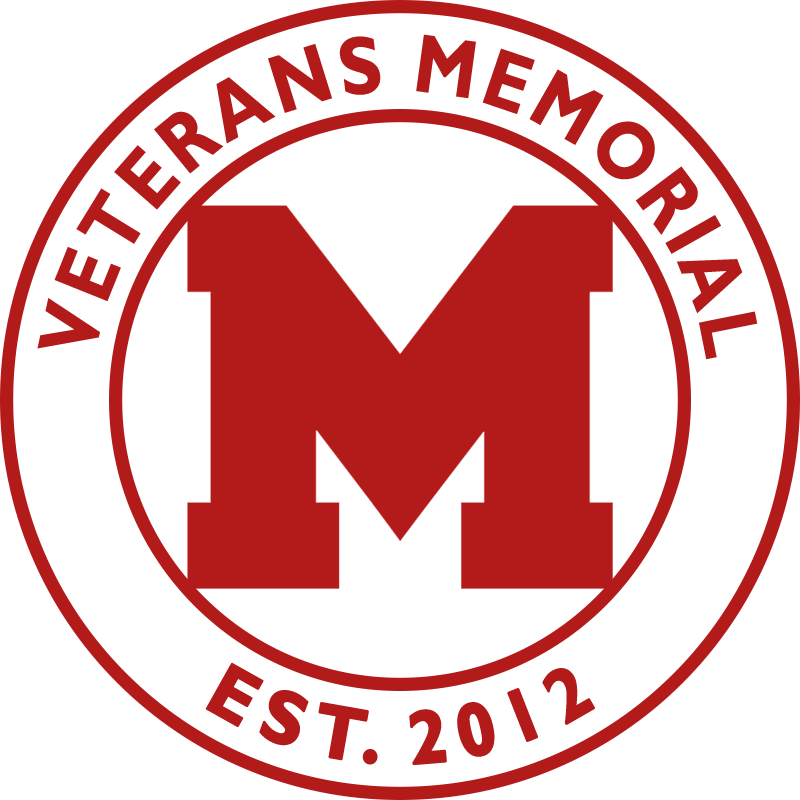
<style>
.page{position:relative;width:800px;height:800px;background:#ffffff}
.page>*{position:absolute;margin:0}
.t1{font:83.1px/86.8px "GillSansMT-Bold";letter-spacing:0.015em;color:#b31b1b;scale:0.86 1}
.t2{font:76px "GillSansMT-Bold";letter-spacing:0.015em;color:#b31b1b;font-weight:bold;scale:0.94 1}
</style>
<div class="page">
<p class="t1" style="left:37px;top:34px;width:721px;height:326px;text-align:center">VETERANS MEMORIAL</p>
<p class="t2" style="left:205px;top:662px;width:390px;height:104px">EST. 2012</p>
</div>
